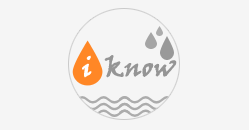
<style>
.page{position:relative;width:249px;height:130px;background:#f5f5f5}
.page>*{position:absolute;margin:0}
.t1{font:25.9px "VinerHandITC";color:#959595;font-weight:bold}
.t2{font:25.9px "VinerHandITC";color:#ffffff;font-weight:bold}
</style>
<div class="page">
<p class="t1" style="left:82px;top:55px;width:95px;height:23px"><span class="t2">i  </span>know</p>
</div>
